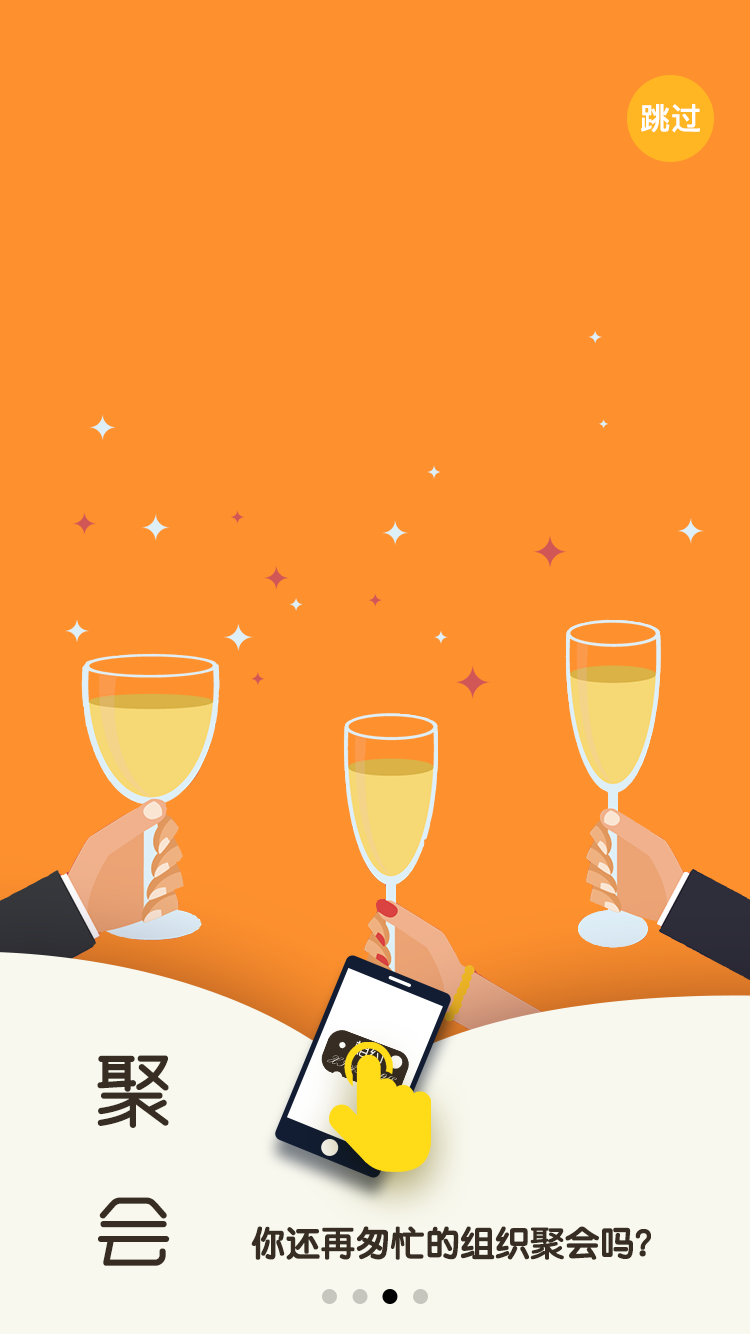
<style>
.page{position:relative;width:750px;height:1334px;background:#fe902e}
.page>*{position:absolute;margin:0}
.t1{font:30px "PingFangSC-Medium";color:#ffffff;font-weight:bold}
.t2{font:80px "MFYueYuan_Noncommercial-Regular";color:#372d23;font-weight:bold}
.t3{font:34px "STYuanti-SC-Bold";color:#372d23;font-weight:bold}
</style>
<div class="page">
<p class="t1" style="left:641px;top:104px;width:59px;height:29px">跳过</p>
<p class="t2" style="left:97px;top:1055px;width:73px;height:211px;text-align:center">聚<br>会</p>
<p class="t3" style="left:251px;top:1226px;width:400px;height:34px">你还再匆忙的组织聚会吗？</p>
</div>
